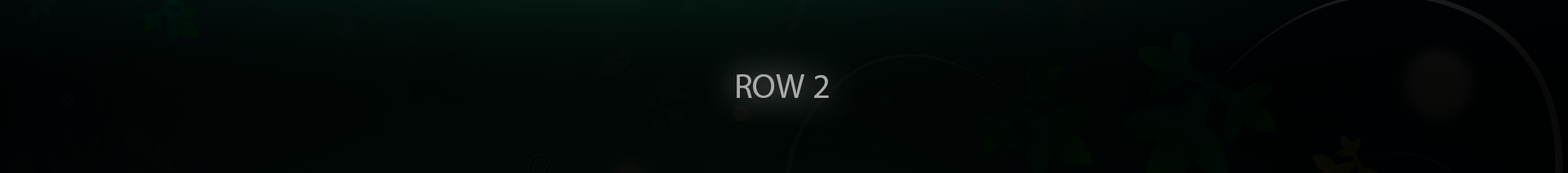
<style>
.page{position:relative;width:1568px;height:173px}
.page>*{position:absolute;margin:0}
.t1{font:34.3px "MyriadPro-Regular";color:#b7b7b7}
</style>
<div class="page">
<p class="t1" style="left:737px;top:74px;width:92px;height:24px;opacity:0.89">ROW 2</p>
</div>
